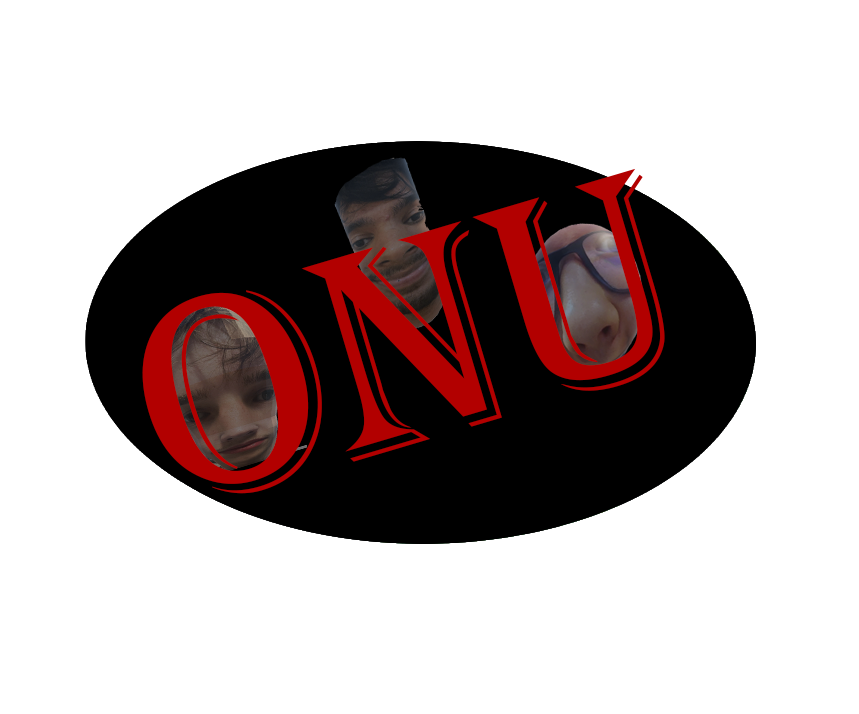
<style>
.page{position:relative;width:859px;height:714px;background:#ffffff}
.page>*{position:absolute;margin:0}
.t1{font:300px "Algerian";color:#b20000;font-variant:small-caps}
</style>
<div class="page">
<p class="t1" style="left:142px;top:168px;width:523px;height:326px;rotate:-17deg">ONU</p>
</div>
